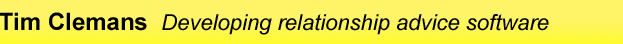
<style>
.page{position:relative;width:623px;height:44px}
.page>*{position:absolute;margin:0}
.t1{font:22px "Arial-ItalicMT";color:#000000}
.t2{font:24px "Arial-BoldMT";color:#000000}
</style>
<div class="page">
<p class="t1" style="left:0px;top:12px;width:549px;height:23px"><span class="t2">Tim Clemans  </span>Developing relationship advice software</p>
</div>
